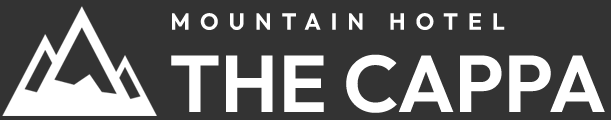
<style>
.page{position:relative;width:611px;height:120px;background:#333333}
.page>*{position:absolute;margin:0}
.t1{font:23px "Outfit-SemiBold";letter-spacing:0.44em;color:#ffffff}
.t2{font:80px "Outfit-SemiBold";letter-spacing:0.005em;color:#ffffff}
</style>
<div class="page">
<p class="t1" style="left:172px;top:13px;width:333px;height:17px">MOUNTAIN HOTEL</p>
<p class="t2" style="left:171px;top:54px;width:434px;height:59px">THE CAPPA</p>
</div>
